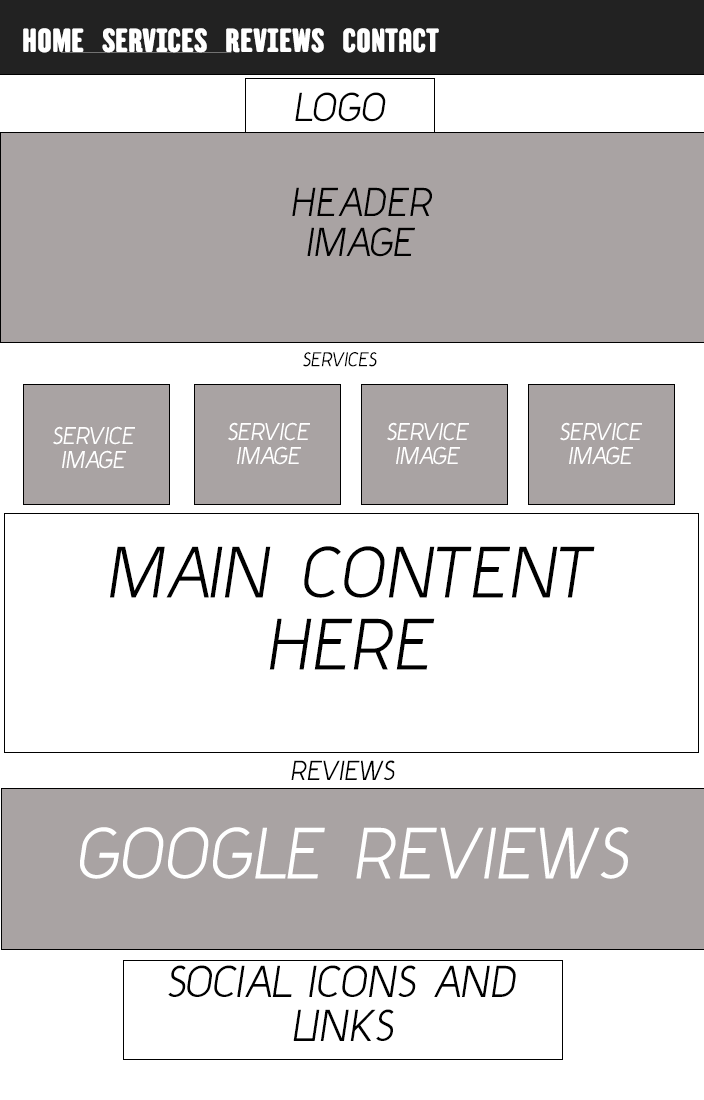
<style>
.page{position:relative;width:704px;height:1100px;background:#ffffff}
.page>*{position:absolute;margin:0}
.t1{font:33.3px "TTBerlinerinsTrial-Grotesk";color:#ffffff;text-transform:uppercase}
.t2{font:33.3px "Y2KNeophyte-Italic";color:#000000;text-transform:uppercase}
.t3{font:16.6px "Y2KNeophyte-Italic";color:#000000;text-transform:uppercase;scale:0.95 1}
.t4{font:20px "Y2KNeophyte-Italic";color:#ffffff;text-transform:uppercase}
.t5{font:60px "Y2KNeophyte-Italic";color:#000000;text-transform:uppercase}
.t6{font:22.7px "Y2KNeophyte-Italic";color:#000000;text-transform:uppercase}
.t7{font:60px "Y2KNeophyte-Italic";color:#ffffff;text-transform:uppercase}
.t8{font:36.7px "Y2KNeophyte-Italic";color:#000000;text-transform:uppercase}
</style>
<div class="page">
<p class="t1" style="left:23px;top:28px;width:416px;height:25px">Home   services   Reviews   Contact</p>
<p class="t2" style="left:295px;top:92px;width:91px;height:30px">logo</p>
<p class="t2" style="left:292px;top:187px;width:140px;height:70px;text-align:center">Header<br>Image</p>
<p class="t3" style="left:303px;top:352px;width:74px;height:15px">Services</p>
<p class="t4" style="left:228px;top:422px;width:82px;height:43px;text-align:center">service<br>image</p>
<p class="t4" style="left:387px;top:422px;width:82px;height:43px;text-align:center">service<br>image</p>
<p class="t4" style="left:560px;top:422px;width:82px;height:43px;text-align:center">service<br>image</p>
<p class="t4" style="left:53px;top:426px;width:82px;height:43px;text-align:center">service<br>image</p>
<p class="t5" style="left:110px;top:546px;width:485px;height:124px;text-align:center">Main Content<br>here</p>
<p class="t6" style="left:291px;top:760px;width:104px;height:20px">Reviews</p>
<p class="t7" style="left:80px;top:827px;width:549px;height:52px">Google Reviews</p>
<p class="t8" style="left:168px;top:965px;width:348px;height:76px;text-align:center">Social Icons and Links</p>
</div>
